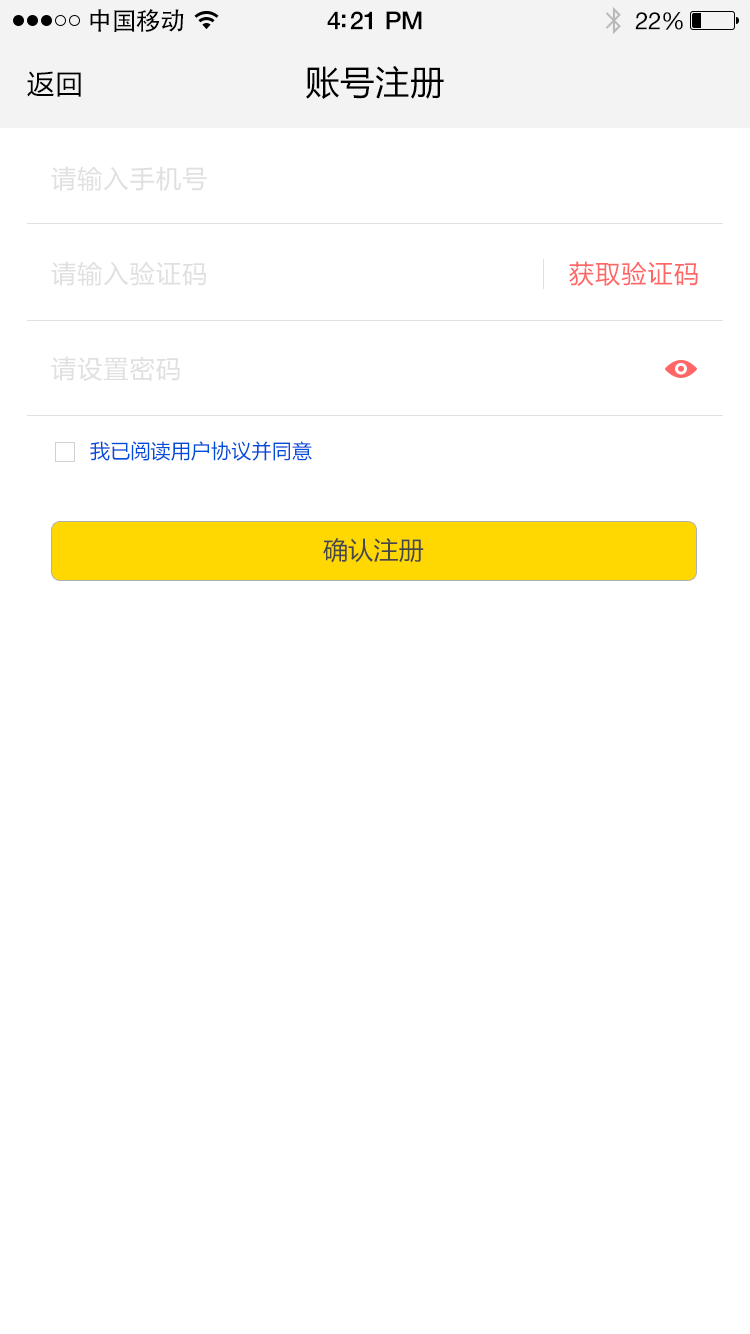
<style>
.page{position:relative;width:750px;height:1334px;background:#ffffff}
.page>*{position:absolute;margin:0}
.t1{font:25px "AdobeHeitiStd-Regular";letter-spacing:-0.025em;color:#000000}
.t2{font:25px "HelveticaNeue-Medium";letter-spacing:-0.02em;color:#000000}
.t3{font:24px "HelveticaNeue";letter-spacing:-0.02em;color:#000000}
.t4{font:34px "MicrosoftYaHei";letter-spacing:0.03em;color:#000000}
.t5{font:27px "MicrosoftYaHei";letter-spacing:0.05em;color:#000000}
.t6{font:25px "MicrosoftYaHei";letter-spacing:0.05em;color:#e0e0e0}
.t7{font:25px "MicrosoftYaHei";letter-spacing:0.05em;color:#ff6666}
.t8{font:20px "MicrosoftYaHei";letter-spacing:0.01em;color:#004dda}
.t9{font:25px "MicrosoftYaHei";letter-spacing:0.01em;color:#555555}
</style>
<div class="page">
<p class="t1" style="left:90px;top:9px;width:94px;height:23px">中国移动</p>
<p class="t2" style="left:327px;top:11px;width:95px;height:19px">4:21 PM</p>
<p class="t3" style="left:635px;top:12px;width:48px;height:18px">22%</p>
<p class="t4" style="left:306px;top:65px;width:138px;height:34px">账号注册</p>
<p class="t5" style="left:27px;top:71px;width:54px;height:26px">返回</p>
<p class="t6" style="left:51px;top:166px;width:156px;height:25px">请输入手机号</p>
<p class="t6" style="left:51px;top:261px;width:155px;height:25px">请输入验证码</p>
<p class="t7" style="left:569px;top:261px;width:129px;height:25px">获取验证码</p>
<p class="t6" style="left:51px;top:356px;width:129px;height:25px">请设置密码</p>
<p class="t8" style="left:90px;top:441px;width:222px;height:20px">我已阅读用户协议并同意</p>
<p class="t9" style="left:323px;top:538px;width:101px;height:25px">确认注册</p>
</div>
